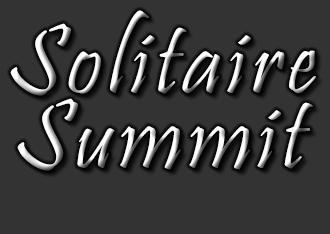
<style>
.page{position:relative;width:330px;height:234px;background:#333333}
.page>*{position:absolute;margin:0}
.t1{font:100px "Pristina-Regular";letter-spacing:0.05em}
</style>
<div class="page">
<p class="t1" style="left:10px;top:10px;width:306px;height:86px">Solitaire</p>
<p class="t1" style="left:17px;top:98px;width:296px;height:73px">Summit</p>
</div>
